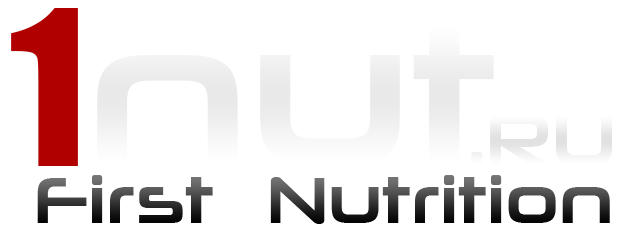
<style>
.page{position:relative;width:641px;height:237px;background:#ffffff}
.page>*{position:absolute;margin:0}
.t1{font:200px "Impact";color:#b00000}
.t2{font:200px "NeuropoliticalRg-Regular";color:#f0f0f0}
.t3{font:72px "NeuropoliticalRg-Regular";color:#f2f2f2}
.t4{font:67px "NeuropoliticalRg-Regular"}
</style>
<div class="page">
<p class="t1" style="left:11px;top:8px;width:67px;height:158px">1</p>
<p class="t2" style="left:97px;top:24px;width:397px;height:140px">nut</p>
<p class="t3" style="left:471px;top:115px;width:141px;height:49px">.RU</p>
<p class="t4" style="left:37px;top:175px;width:573px;height:49px">First  Nutrition</p>
</div>
